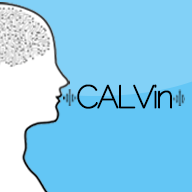
<style>
.page{position:relative;width:192px;height:192px;background:#63c6f5}
.page>*{position:absolute;margin:0}
.t1{font:31.8px "Raleway-Thin";letter-spacing:-0.075em;color:#000000;font-weight:bold}
</style>
<div class="page">
<p class="t1" style="left:77px;top:84px;width:95px;height:25px">CALVin</p>
</div>
